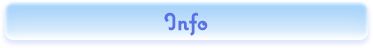
<style>
.page{position:relative;width:373px;height:48px}
.page>*{position:absolute;margin:0}
.t1{font:24px "CoquetteBold";color:#5872e1}
</style>
<div class="page">
<p class="t1" style="left:164px;top:12px;width:44px;height:24px">Info</p>
</div>
